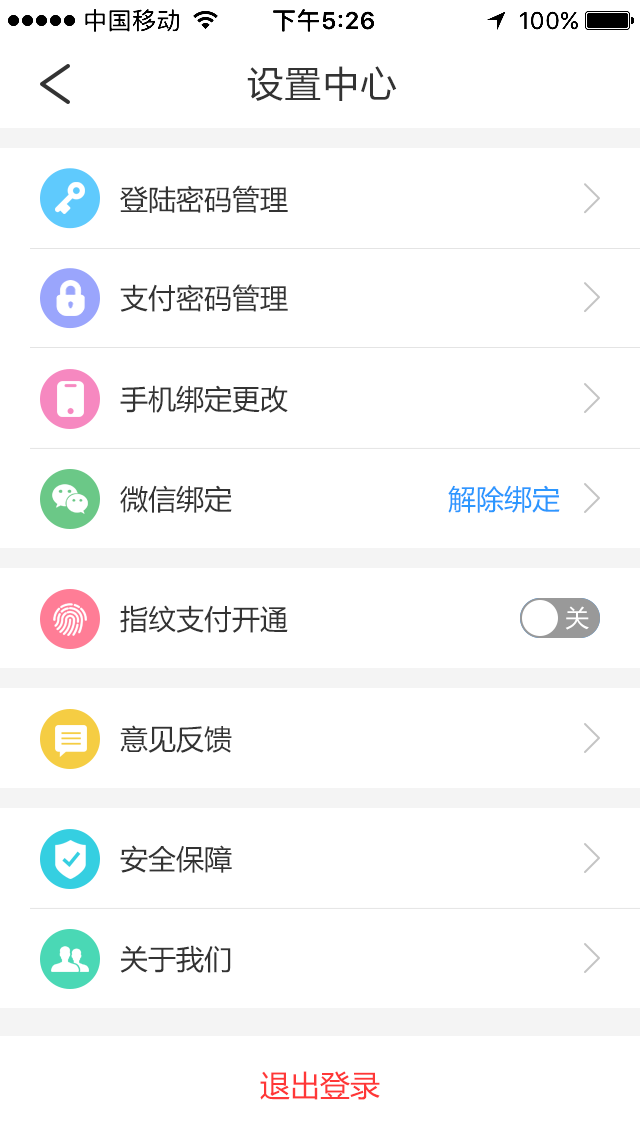
<style>
.page{position:relative;width:640px;height:1136px;background:#ffffff}
.page>*{position:absolute;margin:0}
.t1{font:36px "MicrosoftYaHei";letter-spacing:0.05em;color:#333333}
.t2{font:28px "MicrosoftYaHei";color:#333333}
.t3{font:28px "MicrosoftYaHei";color:#2c97ff}
.t4{font:24px "MicrosoftYaHei";color:#ffffff}
.t5{font:30px "MicrosoftYaHei";color:#ff3737}
</style>
<div class="page">
<p class="t1" style="left:247px;top:66px;width:150px;height:35px">设置中心</p>
<p class="t2" style="left:120px;top:185px;width:168px;height:28px">登陆密码管理</p>
<p class="t2" style="left:120px;top:284px;width:168px;height:28px">支付密码管理</p>
<p class="t2" style="left:120px;top:385px;width:168px;height:28px">手机绑定更改</p>
<p class="t2" style="left:120px;top:485px;width:112px;height:28px">微信绑定</p>
<p class="t3" style="left:448px;top:485px;width:112px;height:28px">解除绑定</p>
<p class="t2" style="left:120px;top:605px;width:168px;height:28px">指纹支付开通</p>
<p class="t4" style="left:565px;top:606px;width:24px;height:24px">关</p>
<p class="t2" style="left:120px;top:725px;width:112px;height:28px">意见反馈</p>
<p class="t2" style="left:120px;top:845px;width:112px;height:28px">安全保障</p>
<p class="t2" style="left:120px;top:945px;width:111px;height:28px">关于我们</p>
<p class="t5" style="left:260px;top:1071px;width:120px;height:29px">退出登录</p>
</div>
